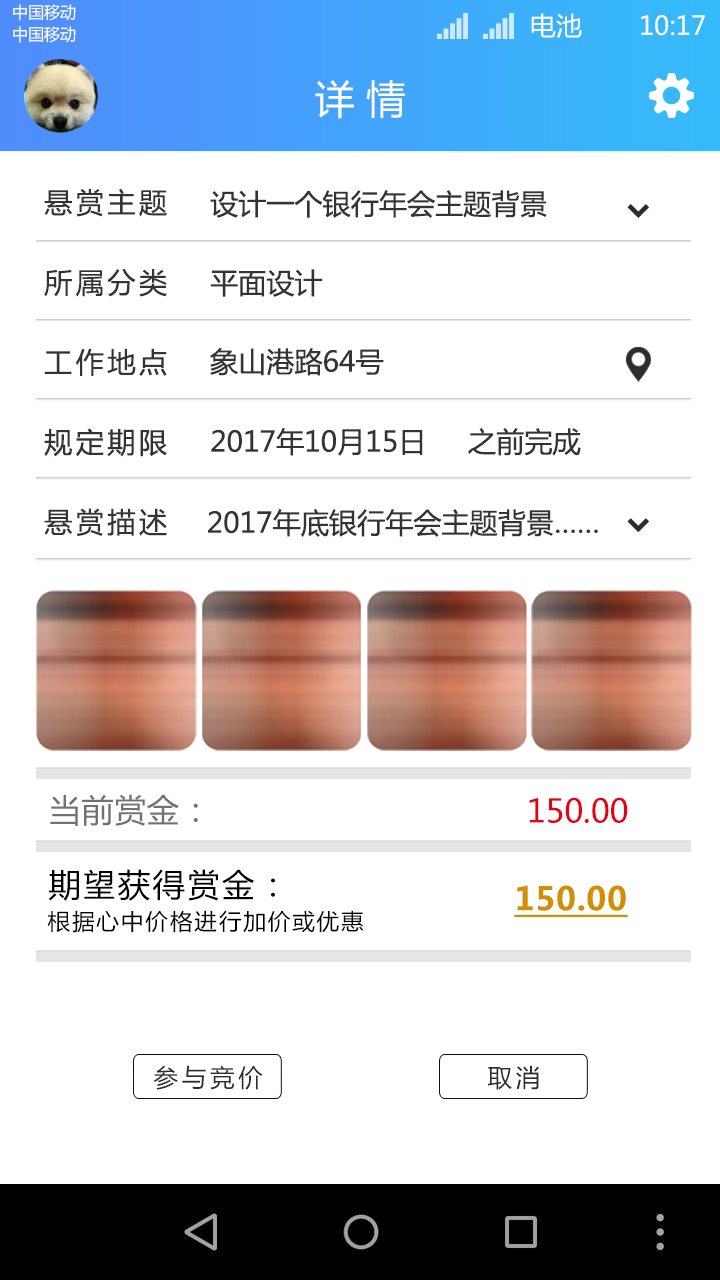
<style>
.page{position:relative;width:720px;height:1280px;background:#ffffff}
.page>*{position:absolute;margin:0}
.t1{font:16.2px "MicrosoftYaHei";color:#ffffff;text-transform:uppercase}
.t2{font:26.1px "MicrosoftYaHei";color:#ffffff;text-transform:uppercase}
.t3{font:39.5px "MicrosoftYaHei";color:#ffffff;text-transform:uppercase}
.t4{font:28.1px/79.9px "MicrosoftYaHei";color:#333333}
.t5{font:28.1px "MicrosoftYaHei";color:#333333}
.t6{font:31.9px "MicrosoftYaHei";color:#727171}
.t7{font:31.9px "MicrosoftYaHei";color:#e60012}
.t8{font:31.9px "MicrosoftYaHei";letter-spacing:0.08em;color:#000000}
.t9{font:31.9px "MicrosoftYaHei-Bold";color:#d28f00;text-decoration:underline}
.t10{font:22.2px "MicrosoftYaHei";letter-spacing:0.08em;color:#000000}
.t11{font:24.5px "MicrosoftYaHei";letter-spacing:0.15em;color:#2b2c2c}
</style>
<div class="page">
<p class="t1" style="left:13px;top:4px;width:63px;height:17px">中国移动</p>
<p class="t2" style="left:531px;top:13px;width:51px;height:25px">电池</p>
<p class="t2" style="left:641px;top:15px;width:64px;height:21px">10:17</p>
<p class="t1" style="left:13px;top:26px;width:63px;height:17px">中国移动</p>
<p class="t3" style="left:315px;top:80px;width:90px;height:39px">详 情</p>
<p class="t4" style="left:44px;top:188px;width:123px;height:348px;text-align:justify">悬赏主题<br>所属分类<br>工作地点<br>规定期限<br>悬赏描述</p>
<p class="t5" style="left:210px;top:190px;width:337px;height:28px">设计一个银行年会主题背景</p>
<p class="t5" style="left:210px;top:269px;width:113px;height:28px">平面设计</p>
<p class="t5" style="left:210px;top:348px;width:174px;height:28px">象山港路64号</p>
<p class="t5" style="left:211px;top:428px;width:370px;height:28px">2017年10月15日     之前完成</p>
<p class="t5" style="left:208px;top:509px;width:390px;height:28px">2017年底银行年会主题背景……</p>
<p class="t6" style="left:50px;top:794px;width:148px;height:32px">当前赏金：</p>
<p class="t7" style="left:529px;top:797px;width:99px;height:26px">150.00</p>
<p class="t8" style="left:48px;top:869px;width:227px;height:32px">期望获得赏金：</p>
<p class="t9" style="left:514px;top:885px;width:114px;height:32px">150.00</p>
<p class="t10" style="left:47px;top:910px;width:317px;height:23px">根据心中价格进行加价或优惠</p>
<p class="t11" style="left:153px;top:1065px;width:110px;height:25px">参与竞价</p>
<p class="t11" style="left:487px;top:1065px;width:52px;height:25px">取消</p>
</div>
